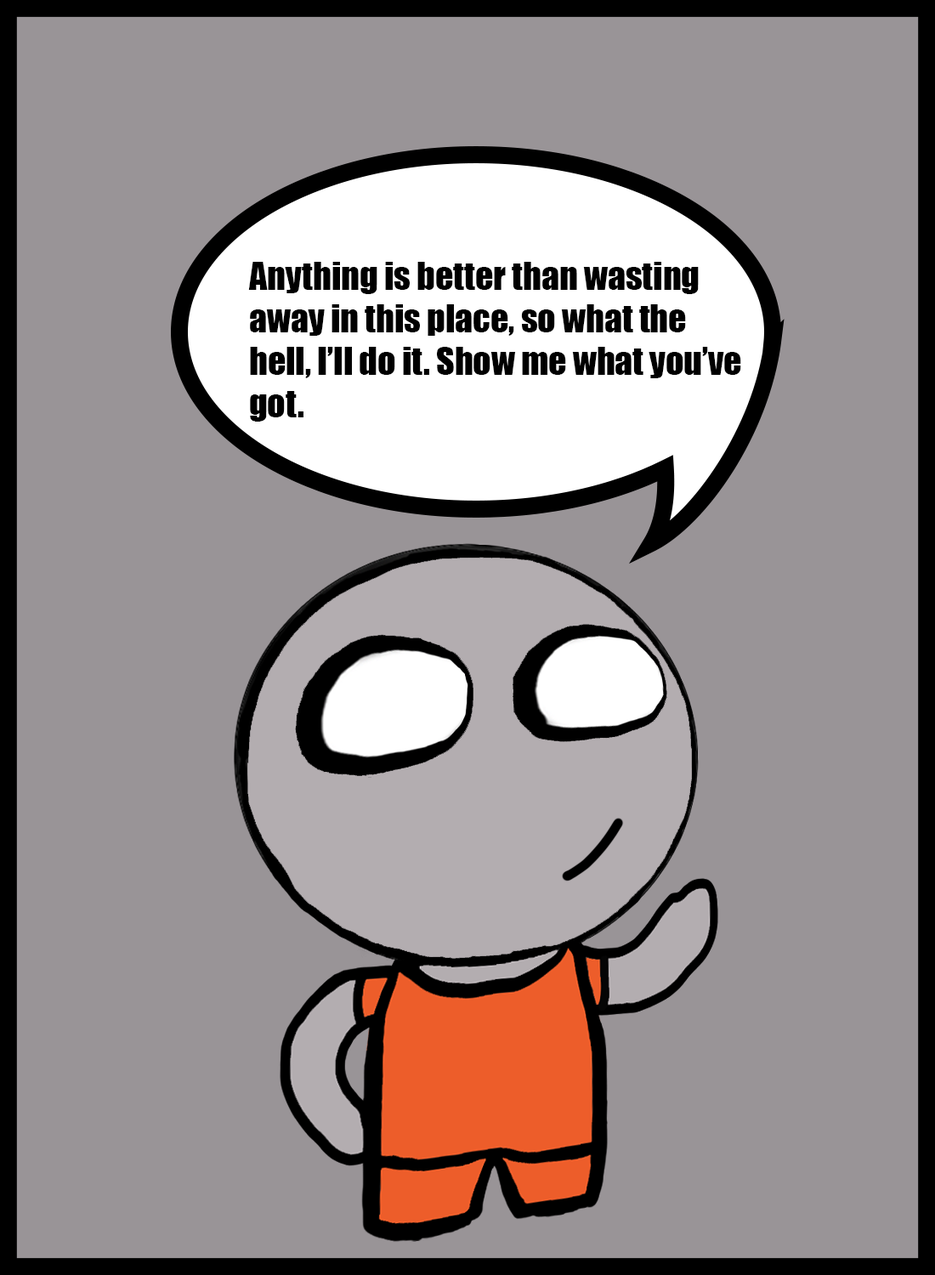
<style>
.page{position:relative;width:935px;height:1275px;background:#999497}
.page>*{position:absolute;margin:0}
.t1{font:35.4px "Impact";color:#000000}
</style>
<div class="page">
<p class="t1" style="left:248px;top:262px;width:493px;height:160px">Anything is better than wasting<br>away in this place, so what the<br>hell, I’ll do it. Show me what you’ve<br>got.</p>
</div>
